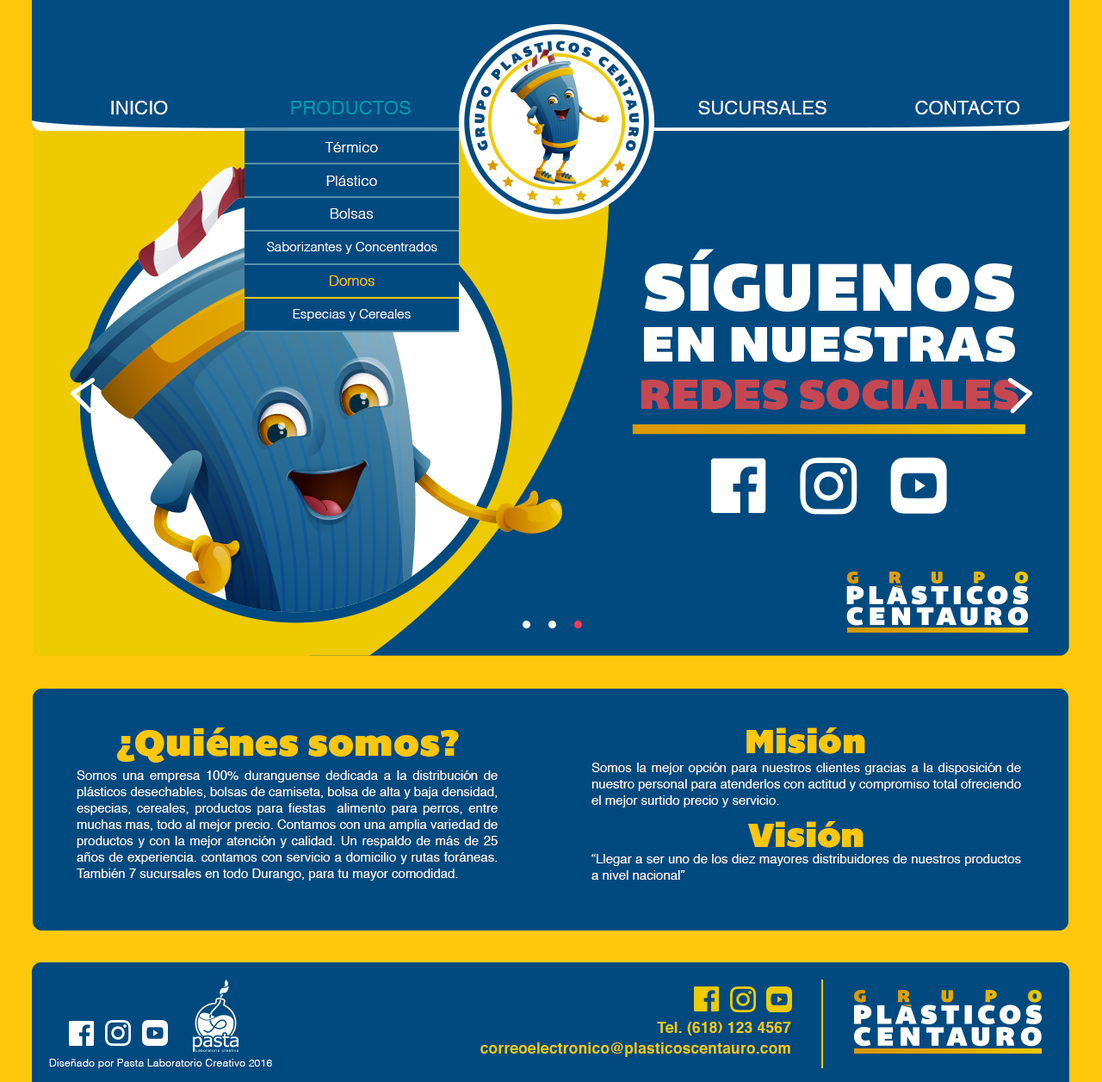
<style>
.page{position:relative;width:1102px;height:1082px;background:#004a80}
.page>*{position:absolute;margin:0}
.t1{font:19.1px "Helvetica";color:#ffffff}
.t2{font:19.1px "Helvetica";color:#0098ae}
.t3{font:14.6px "Helvetica-Light";color:#ffffff}
.t4{font:12.9px "Helvetica-Light";color:#ffffff}
.t5{font:14.6px "Helvetica-Light";color:#ffc709}
.t6{font:37.7px "Bemio";color:#ffc709}
.t7{font:34.4px "Bemio";color:#ffc709}
.t8{font:12.9px/16.4px "Helvetica";color:#ffffff}
.t9{font:14.7px/20.7px "Helvetica-Bold";letter-spacing:0.02em;color:#eeca00}
.t10{font:10.3px "Helvetica-Light";letter-spacing:0.02em;color:#ffffff}
</style>
<div class="page">
<p class="t1" style="left:111px;top:101px;width:57px;height:13px">INICIO</p>
<p class="t2" style="left:291px;top:101px;width:120px;height:13px">PRODUCTOS</p>
<p class="t1" style="left:698px;top:101px;width:128px;height:13px">SUCURSALES</p>
<p class="t1" style="left:915px;top:101px;width:105px;height:13px">CONTACTO</p>
<p class="t3" style="left:325px;top:142px;width:53px;height:10px">Térmico</p>
<p class="t3" style="left:326px;top:176px;width:51px;height:10px">Plástico</p>
<p class="t3" style="left:331px;top:208px;width:43px;height:11px">Bolsas</p>
<p class="t4" style="left:267px;top:242px;width:170px;height:12px">Saborizantes y Concentrados</p>
<p class="t5" style="left:330px;top:275px;width:44px;height:11px">Domos</p>
<p class="t4" style="left:293px;top:309px;width:118px;height:12px">Especias y Cereales</p>
<p class="t6" style="left:117px;top:727px;width:342px;height:36px">¿Quiénes somos?</p>
<p class="t7" style="left:746px;top:727px;width:119px;height:27px">Misión</p>
<p class="t8" style="left:77px;top:770px;width:421px;height:111px;text-align:justify">Somos una empresa 100% duranguense dedicada a la distribución de plásticos desechables, bolsas de camiseta, bolsa de alta y baja densidad, especias, cereales, productos para fiestas  alimento para perros, entre muchas mas, todo al mejor precio. Contamos con una amplia variedad de productos y con la mejor atención y calidad. <br>Un respaldo de más de 25 años de experiencia. contamos con servicio a domicilio y rutas foráneas. También 7 sucursales en todo Durango, para tu mayor comodidad.</p>
<p class="t8" style="left:591px;top:763px;width:430px;height:45px;text-align:justify">Somos la mejor opción para nuestros clientes gracias a la disposición de nuestro personal para atenderlos con actitud y compromiso total ofreciendo el mejor surtido precio y servicio.</p>
<p class="t7" style="left:748px;top:821px;width:115px;height:27px">Visión</p>
<p class="t8" style="left:591px;top:854px;width:430px;height:26px;text-align:justify">“Llegar a ser uno de los diez mayores distribuidores de nuestros productos a nivel nacional”</p>
<p class="t9" style="left:480px;top:1022px;width:311px;height:35px;text-align:right">Tel. (618) 123 4567<br>correoelectronico@plasticoscentauro.com</p>
<p class="t10" style="left:49px;top:1059px;width:223px;height:9px">Diseñado por Pasta Laboratorio Creativo 2016</p>
</div>
